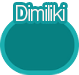
<style>
.page{position:relative;width:79px;height:75px;background:#078081}
.page>*{position:absolute;margin:0}
.t1{font:20px "GothicMB101Pro-Light";letter-spacing:-0.08em;color:#fff6f3;scale:0.9 1}
</style>
<div class="page">
<p class="t1" style="left:16px;top:5px;width:49px;height:16px">Dimiliki</p>
</div>
